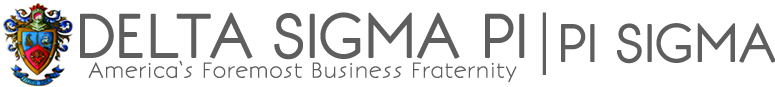
<style>
.page{position:relative;width:775px;height:87px;background:#ffffff}
.page>*{position:absolute;margin:0}
.t1{font:58.3px "BonvenoCF-Light";letter-spacing:-0.075em;color:#5e5e5f;font-weight:bold}
.t2{font:66.7px "BellMT";letter-spacing:-0.075em;color:#5e5e5f}
.t3{font:50px "BonvenoCF-Light";letter-spacing:-0.075em;color:#5e5e5f;font-weight:bold}
.t4{font:20.8px "BonvenoCF-Light";letter-spacing:-0.025em;color:#5e5e5f}
</style>
<div class="page">
<p class="t1" style="left:80px;top:12px;width:445px;height:48px">DELTA SIGMA PI</p>
<p class="t2" style="left:542px;top:12px;width:4px;height:63px">|</p>
<p class="t3" style="left:561px;top:23px;width:215px;height:41px">PI SIGMA</p>
<p class="t4" style="left:88px;top:60px;width:429px;height:23px">America‘s Foremost Business Fraternity</p>
</div>
